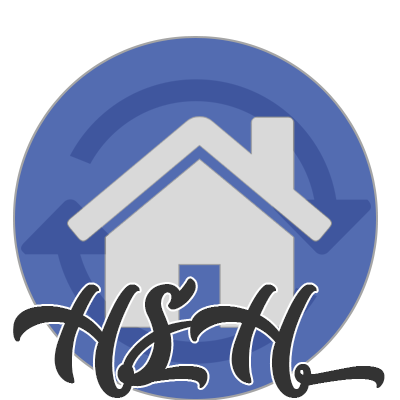
<style>
.page{position:relative;width:400px;height:400px;background:#ffffff}
.page>*{position:absolute;margin:0}
.t1{font:96px "Dopestyle";color:#333333}
</style>
<div class="page">
<p class="t1" style="left:13px;top:278px;width:372px;height:120px">HSH</p>
</div>
